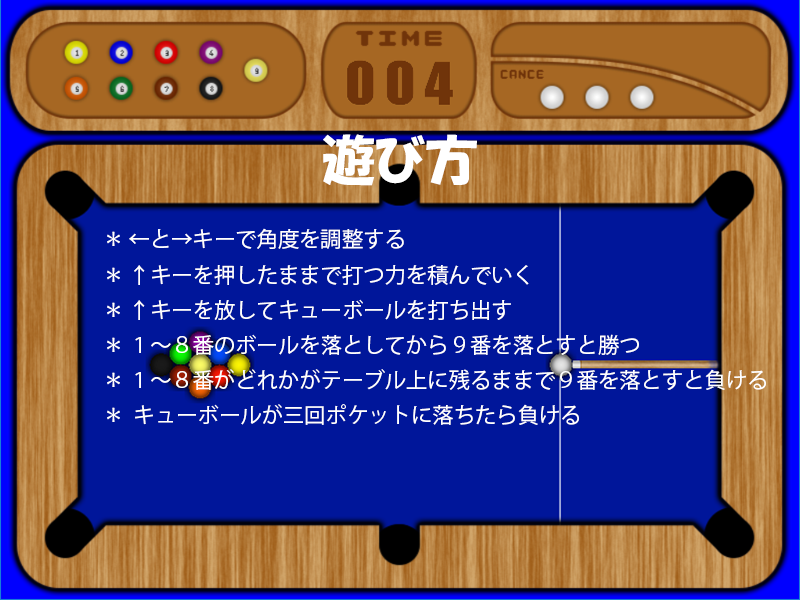
<style>
.page{position:relative;width:800px;height:600px;background:#00169a}
.page>*{position:absolute;margin:0}
.t1{font:53.3px "HGPSoeiKakupoptai";color:#ffffff}
.t2{font:21.3px "KozGoPr6N-Regular";color:#ffffff}
</style>
<div class="page">
<p class="t1" style="left:323px;top:134px;width:154px;height:52px">遊び方</p>
<p class="t2" style="left:107px;top:228px;width:297px;height:21px">＊ ←と→キーで角度を調整する</p>
<p class="t2" style="left:107px;top:264px;width:422px;height:21px">＊ ↑キーを押したままで打つ力を積んでいく</p>
<p class="t2" style="left:107px;top:299px;width:404px;height:21px">＊ ↑キーを放してキューボールを打ち出す</p>
<p class="t2" style="left:107px;top:334px;width:532px;height:21px">＊ １～８番のボールを落としてから９番を落とすと勝つ</p>
<p class="t2" style="left:107px;top:369px;width:659px;height:21px">＊ １～８番がどれかがテーブル上に残るままで９番を落とすと負ける</p>
<p class="t2" style="left:107px;top:404px;width:472px;height:21px">＊  キューボールが三回ポケットに落ちたら負ける</p>
</div>
